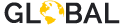
<style>
.page{position:relative;width:123px;height:25px;background:#ffffff}
.page>*{position:absolute;margin:0}
.t1{font:28px "Raleway-SemiBold";color:#212226;font-weight:bold}
</style>
<div class="page">
<p class="t1" style="left:4px;top:2px;width:116px;height:22px">GL   BAL</p>
</div>
